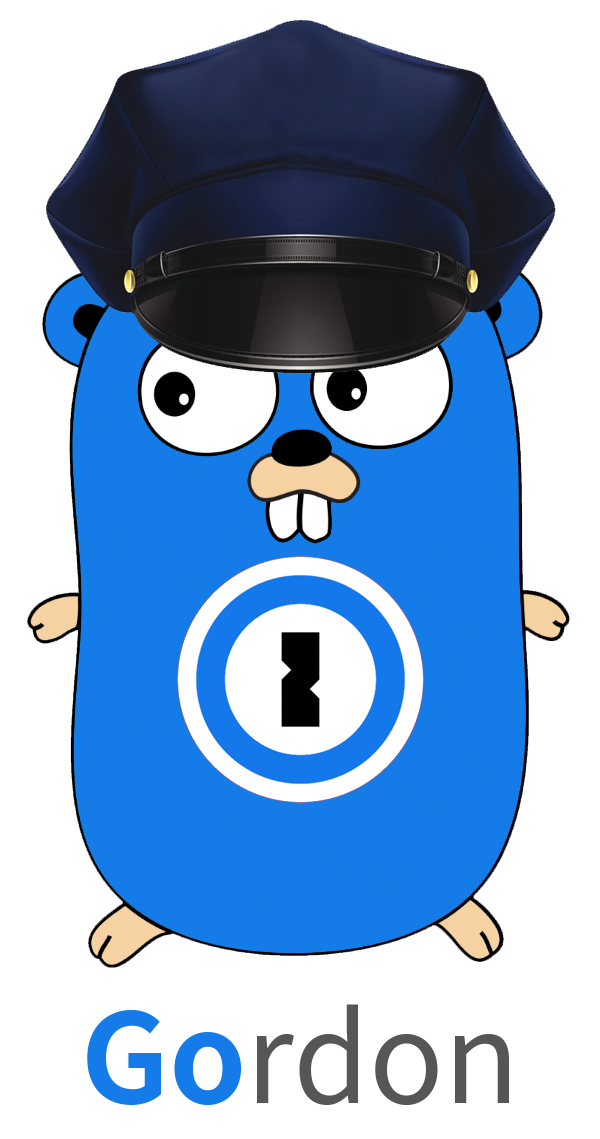
<style>
.page{position:relative;width:600px;height:1139px;background:#ffffff}
.page>*{position:absolute;margin:0}
.t1{font:123.4px "NotoSansCJKjp-Regular";color:#565656}
.t2{font:123.4px "NotoSansCJKjp-Bold";color:#147be8}
</style>
<div class="page">
<p class="t1" style="left:87px;top:1004px;width:422px;height:102px"><span class="t2">Go</span>rdon</p>
</div>
